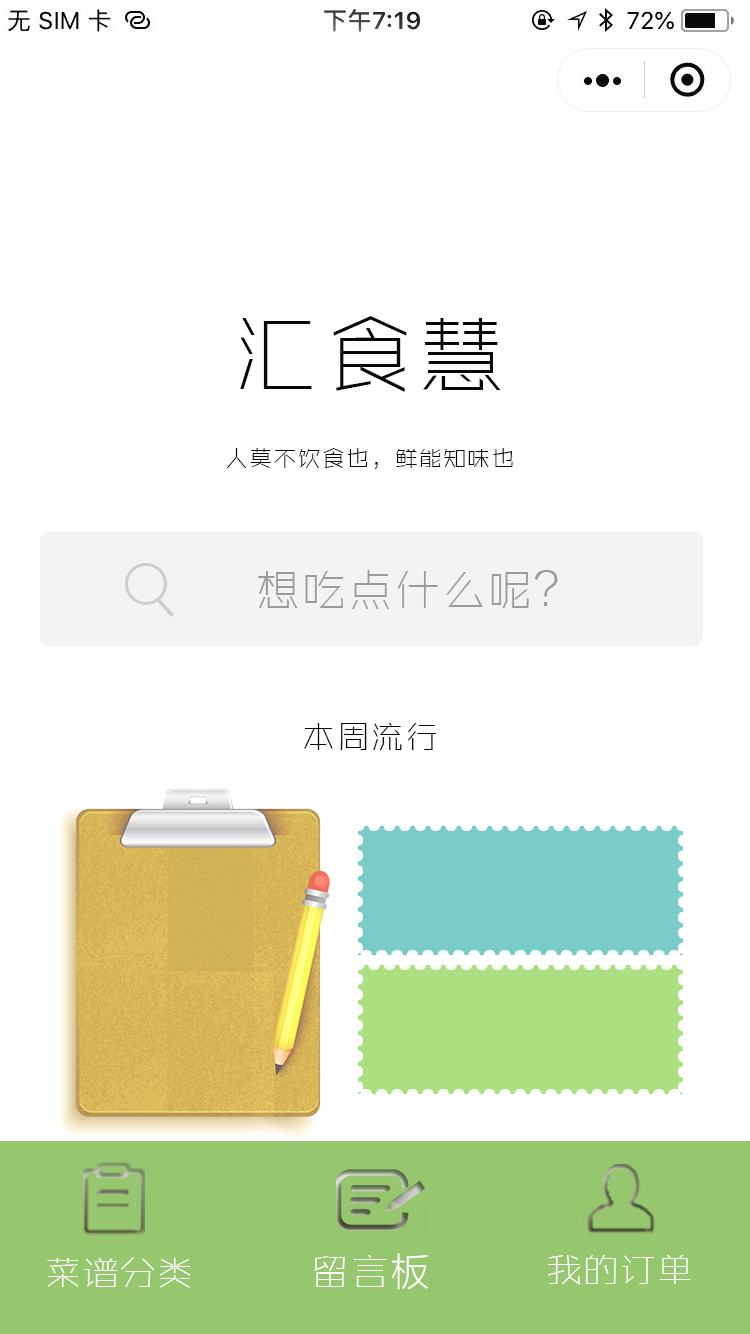
<style>
.page{position:relative;width:750px;height:1334px;background:#ffffff}
.page>*{position:absolute;margin:0}
.t1{font:87.7px "ZHSRXT--GBK1-0";letter-spacing:0.04em;color:#080808}
.t2{font:23.4px "ZHSRXT--GBK1-0";letter-spacing:0.04em;color:#080808}
.t3{font:44.9px "ZHSRXT--GBK1-0";letter-spacing:0.04em;color:#9c9b9b}
.t4{font:33.2px "ZHSRXT--GBK1-0";letter-spacing:0.04em;color:#080808}
.t5{font:38.7px "ZHSRXT--GBK1-0";letter-spacing:0.04em;color:#ffffff}
.t6{font:36.3px "ZHSRXT--GBK1-0";letter-spacing:0.04em;color:#ffffff}
</style>
<div class="page">
<p class="t1" style="left:240px;top:316px;width:261px;height:76px">汇食慧</p>
<p class="t2" style="left:226px;top:448px;width:287px;height:21px">人莫不饮食也，鲜能知味也</p>
<p class="t3" style="left:258px;top:570px;width:300px;height:39px">想吃点什么呢？</p>
<p class="t4" style="left:304px;top:723px;width:132px;height:27px">本周流行</p>
<p class="t5" style="left:314px;top:1253px;width:114px;height:37px">留言板</p>
<p class="t6" style="left:47px;top:1257px;width:143px;height:31px">菜谱分类</p>
<p class="t6" style="left:547px;top:1255px;width:144px;height:30px">我的订单</p>
</div>
